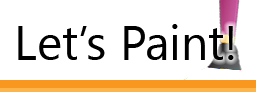
<style>
.page{position:relative;width:256px;height:92px;background:#ffffff}
.page>*{position:absolute;margin:0}
.t1{font:48px "SegoeUI";color:#000000}
</style>
<div class="page">
<p class="t1" style="left:18px;top:24px;width:216px;height:36px">Let’s Paint!</p>
</div>
